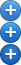
<style>
.page{position:relative;width:21px;height:65px}
.page>*{position:absolute;margin:0}
.t1{font:17px "Tahoma-Bold";letter-spacing:0.03em;color:#ffffff}
</style>
<div class="page">
<p class="t1" style="left:5px;top:5px;width:11px;height:10px">+</p>
<p class="t1" style="left:5px;top:27px;width:11px;height:10px">+</p>
<p class="t1" style="left:5px;top:49px;width:11px;height:10px">+</p>
</div>
